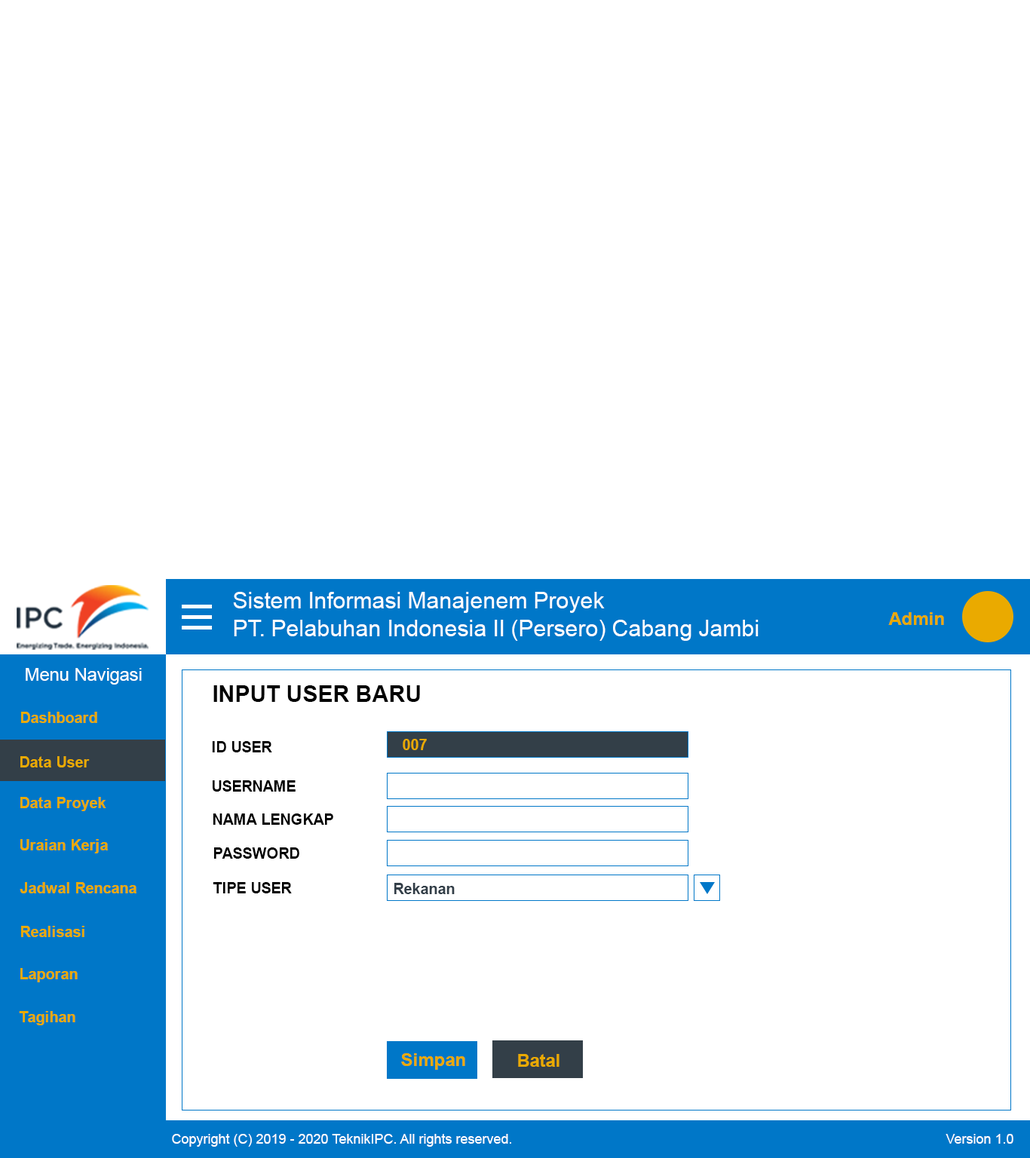
<style>
.page{position:relative;width:1030px;height:1158px;background:#ffffff}
.page>*{position:absolute;margin:0}
.t1{font:22.6px "ArialMT";color:#ffffff}
.t2{font:18.1px "Arial-BoldMT";color:#eaaa00}
.t3{font:18.1px "ArialMT";color:#ffffff}
.t4{font:22.6px "Arial-BoldMT";color:#000000}
.t5{font:15.1px "Arial-BoldMT";color:#eaaa00}
.t6{font:15.1px "Arial-BoldMT";color:#000000}
.t7{font:15.1px "Arial-BoldMT";color:#323e48}
.t8{font:13.6px "ArialMT";color:#ffffff}
</style>
<div class="page">
<p class="t1" style="left:233px;top:592px;width:372px;height:21px">Sistem Informasi Manajenem Proyek</p>
<p class="t2" style="left:888px;top:612px;width:56px;height:13px">Admin</p>
<p class="t1" style="left:234px;top:620px;width:524px;height:21px">PT. Pelabuhan Indonesia II (Persero) Cabang Jambi</p>
<p class="t3" style="left:26px;top:668px;width:116px;height:17px">Menu Navigasi</p>
<p class="t4" style="left:213px;top:685px;width:207px;height:17px">INPUT USER BARU</p>
<p class="t5" style="left:21px;top:712px;width:76px;height:11px">Dashboard</p>
<p class="t6" style="left:212px;top:741px;width:60px;height:11px">ID USER</p>
<p class="t5" style="left:403px;top:739px;width:24px;height:11px">007</p>
<p class="t5" style="left:20px;top:756px;width:70px;height:11px">Data User</p>
<p class="t6" style="left:213px;top:780px;width:83px;height:12px">USERNAME</p>
<p class="t5" style="left:20px;top:797px;width:86px;height:14px">Data Proyek</p>
<p class="t6" style="left:213px;top:813px;width:120px;height:12px">NAMA LENGKAP</p>
<p class="t5" style="left:20px;top:839px;width:88px;height:14px">Uraian Kerja</p>
<p class="t6" style="left:214px;top:847px;width:85px;height:12px">PASSWORD</p>
<p class="t5" style="left:20px;top:882px;width:116px;height:11px">Jadwal Rencana</p>
<p class="t6" style="left:213px;top:882px;width:79px;height:11px">TIPE USER</p>
<p class="t7" style="left:394px;top:883px;width:61px;height:11px">Rekanan</p>
<p class="t5" style="left:21px;top:926px;width:63px;height:11px">Realisasi</p>
<p class="t5" style="left:20px;top:968px;width:58px;height:14px">Laporan</p>
<p class="t5" style="left:19px;top:1011px;width:56px;height:14px">Tagihan</p>
<p class="t2" style="left:401px;top:1053px;width:64px;height:17px">Simpan</p>
<p class="t2" style="left:518px;top:1054px;width:41px;height:13px">Batal</p>
<p class="t8" style="left:172px;top:1134px;width:339px;height:13px">Copyright (C) 2019 - 2020 TeknikIPC. All rights reserved.</p>
<p class="t8" style="left:945px;top:1134px;width:68px;height:10px">Version 1.0</p>
</div>
